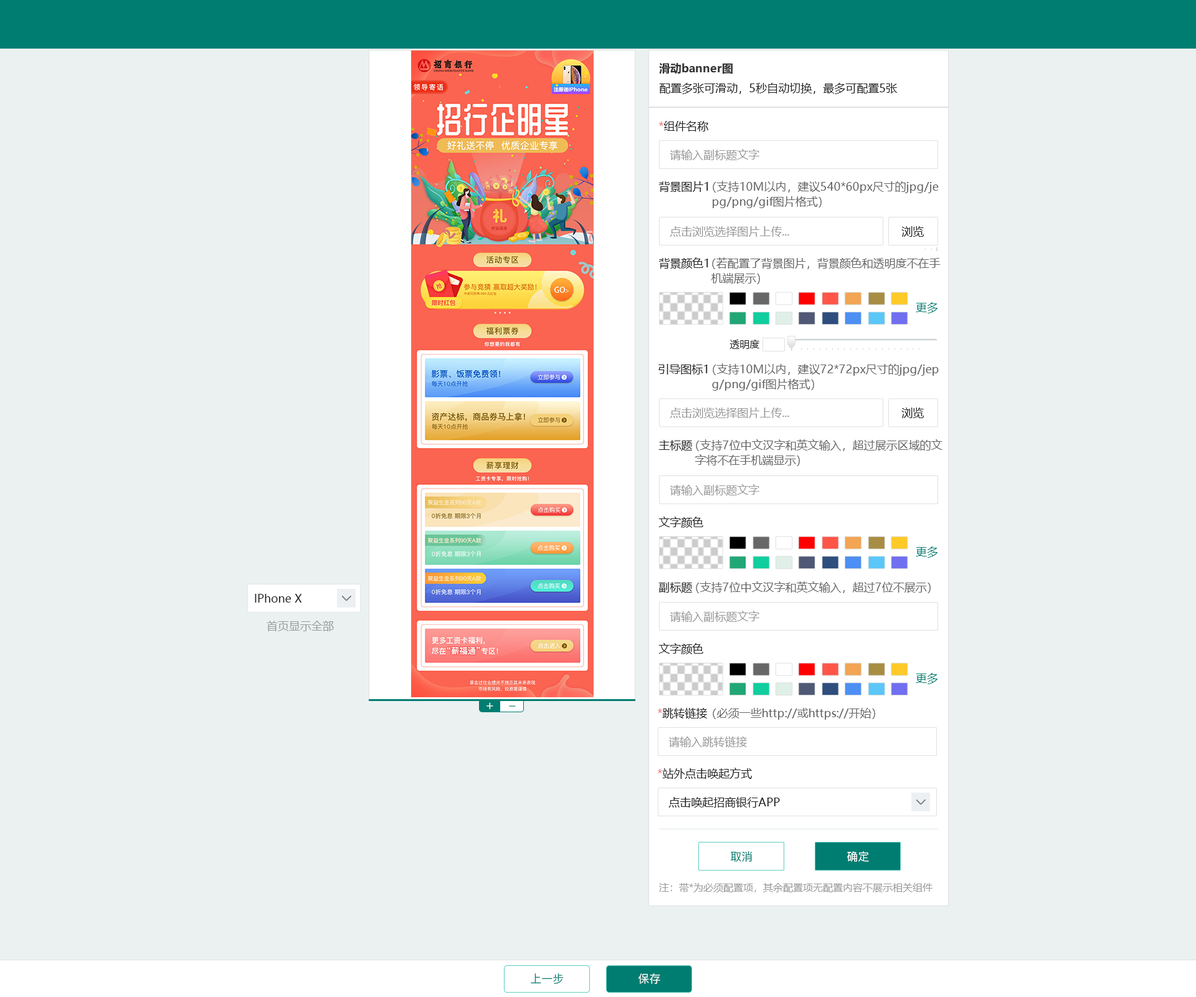
<style>
.page{position:relative;width:1196px;height:997px;background:#ebf1f1}
.page>*{position:absolute;margin:0}
.t1{font:11.2px "MicrosoftYaHei-Bold";color:#333333}
.t2{font:11.2px "MicrosoftYaHei";color:#222222}
.t3{font:11.2px "MicrosoftYaHei";color:#ee7575}
.t4{font:11.2px "MicrosoftYaHei";color:#999999}
.t5{font:11.2px/15px "MicrosoftYaHei";color:#666666}
.t6{font:11.2px "MicrosoftYaHei";color:#007d71}
.t7{font:10px "MicrosoftYaHei";color:#222222}
.t8{font:11.2px "MicrosoftYaHei";color:#666666}
.t9{font:12.5px "PingFang-SC-Medium";color:#ffffff}
.t10{font:12.5px "PingFang-SC-Medium"}
.t11{font:11.2px "PingFang-SC-Medium";color:#007d71}
.t12{font:11.2px "PingFang-SC-Medium";color:#ffffff}
.t13{font:10px "MicrosoftYaHei";color:#999999}
</style>
<div class="page">
<p class="t1" style="left:659px;top:63px;width:74px;height:11px">滑动banner图</p>
<p class="t2" style="left:659px;top:83px;width:238px;height:11px">配置多张可滑动，5秒自动切换，最多可配置5张</p>
<p class="t2" style="left:659px;top:121px;width:49px;height:10px"><span class="t3">*</span>组件名称</p>
<p class="t4" style="left:670px;top:149px;width:89px;height:12px">请输入副标题文字</p>
<p class="t2" style="left:659px;top:181px;width:49px;height:11px">背景图片1</p>
<p class="t5" style="left:713px;top:181px;width:226px;height:27px">（支持10M以内，建议540*60px尺寸的jpg/je<br>  pg/png/gif图片格式）</p>
<p class="t4" style="left:670px;top:226px;width:119px;height:11px">点击浏览选择图片上传...</p>
<p class="t2" style="left:902px;top:226px;width:22px;height:11px">浏览</p>
<p class="t2" style="left:659px;top:257px;width:49px;height:12px">背景颜色1</p>
<p class="t5" style="left:711px;top:257px;width:230px;height:27px">（若配置了背景图片，背景颜色和透明度不在手<br>  机端展示）</p>
<p class="t6" style="left:916px;top:302px;width:22px;height:11px">更多</p>
<p class="t7" style="left:730px;top:340px;width:29px;height:9px">透明度</p>
<p class="t2" style="left:659px;top:364px;width:49px;height:10px">引导图标1</p>
<p class="t5" style="left:712px;top:363px;width:227px;height:28px">（支持10M以内，建议72*72px尺寸的jpg/jep<br>  g/png/gif图片格式）</p>
<p class="t4" style="left:670px;top:407px;width:119px;height:11px">点击浏览选择图片上传...</p>
<p class="t2" style="left:902px;top:407px;width:22px;height:11px">浏览</p>
<p class="t2" style="left:659px;top:440px;width:33px;height:11px">主标题</p>
<p class="t5" style="left:695px;top:439px;width:248px;height:27px">（支持7位中文汉字和英文输入，超过展示区域的文<br>  字将不在手机端显示）</p>
<p class="t4" style="left:670px;top:484px;width:89px;height:12px">请输入副标题文字</p>
<p class="t2" style="left:659px;top:516px;width:44px;height:12px">文字颜色</p>
<p class="t6" style="left:916px;top:546px;width:22px;height:12px">更多</p>
<p class="t2" style="left:659px;top:582px;width:33px;height:11px">副标题</p>
<p class="t8" style="left:696px;top:581px;width:235px;height:12px">（支持7位中文汉字和英文输入，超过7位不展示）</p>
<p class="t2" style="left:255px;top:594px;width:47px;height:8px">IPhone X</p>
<p class="t4" style="left:670px;top:611px;width:89px;height:11px">请输入副标题文字</p>
<p class="t4" style="left:267px;top:621px;width:67px;height:10px">首页显示全部</p>
<p class="t2" style="left:659px;top:643px;width:44px;height:11px">文字颜色</p>
<p class="t6" style="left:916px;top:673px;width:22px;height:11px">更多</p>
<p class="t9" style="left:487px;top:702px;width:6px;height:8px">+</p>
<p class="t10" style="left:509px;top:705px;width:7px;height:2px">_</p>
<p class="t2" style="left:658px;top:708px;width:49px;height:11px"><span class="t3">*</span>跳转链接</p>
<p class="t8" style="left:713px;top:708px;width:162px;height:12px">（必须一些http://或https://开始）</p>
<p class="t4" style="left:669px;top:736px;width:78px;height:12px">请输入跳转链接</p>
<p class="t2" style="left:658px;top:768px;width:94px;height:11px"><span class="t3">*</span>站外点击唤起方式</p>
<p class="t2" style="left:669px;top:797px;width:111px;height:10px">点击唤起招商银行APP</p>
<p class="t11" style="left:731px;top:851px;width:21px;height:11px">取消</p>
<p class="t12" style="left:847px;top:851px;width:22px;height:11px">确定</p>
<p class="t13" style="left:659px;top:883px;width:274px;height:9px">注：带*为必须配置项，其余配置项无配置内容不展示相关组件</p>
<p class="t11" style="left:531px;top:973px;width:33px;height:11px">上一步</p>
<p class="t12" style="left:638px;top:973px;width:22px;height:11px">保存</p>
</div>
